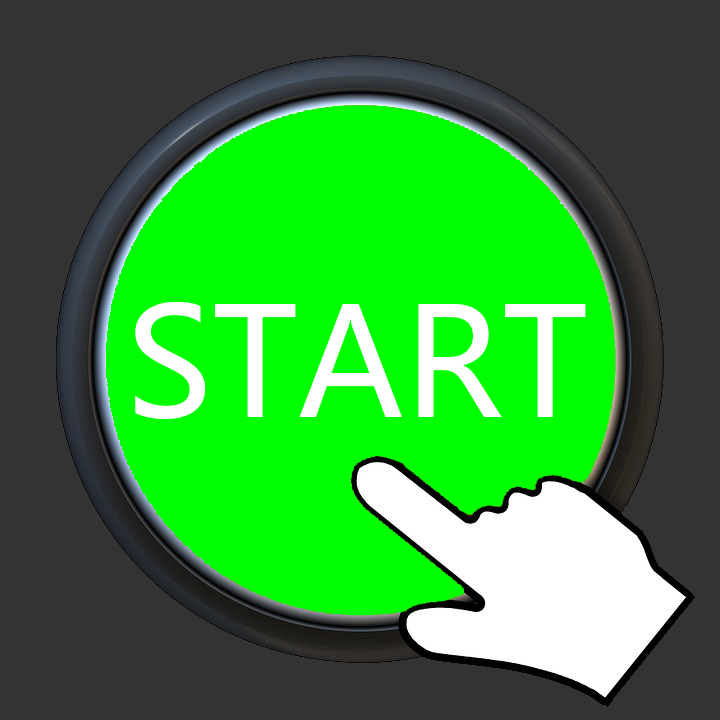
<style>
.page{position:relative;width:720px;height:720px;background:#333333}
.page>*{position:absolute;margin:0}
.t1{font:150px "MicrosoftYaHei";color:#ffffff;font-variant:small-caps}
</style>
<div class="page">
<p class="t1" style="left:135px;top:302px;width:451px;height:117px">START</p>
</div>
